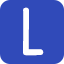
<style>
.page{position:relative;width:64px;height:64px;background:#304ab9}
.page>*{position:absolute;margin:0}
.t1{font:68px "Minou-Regular";color:#ffffff}
</style>
<div class="page">
<p class="t1" style="left:23px;top:7px;width:21px;height:49px">L</p>
</div>
